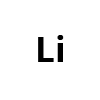
<style>
.page{position:relative;width:100px;height:100px;background:#ffffff}
.page>*{position:absolute;margin:0}
.t1{font:35px "OpenSans-Bold";color:#000000}
</style>
<div class="page">
<p class="t1" style="left:38px;top:35px;width:26px;height:27px">Li</p>
</div>
